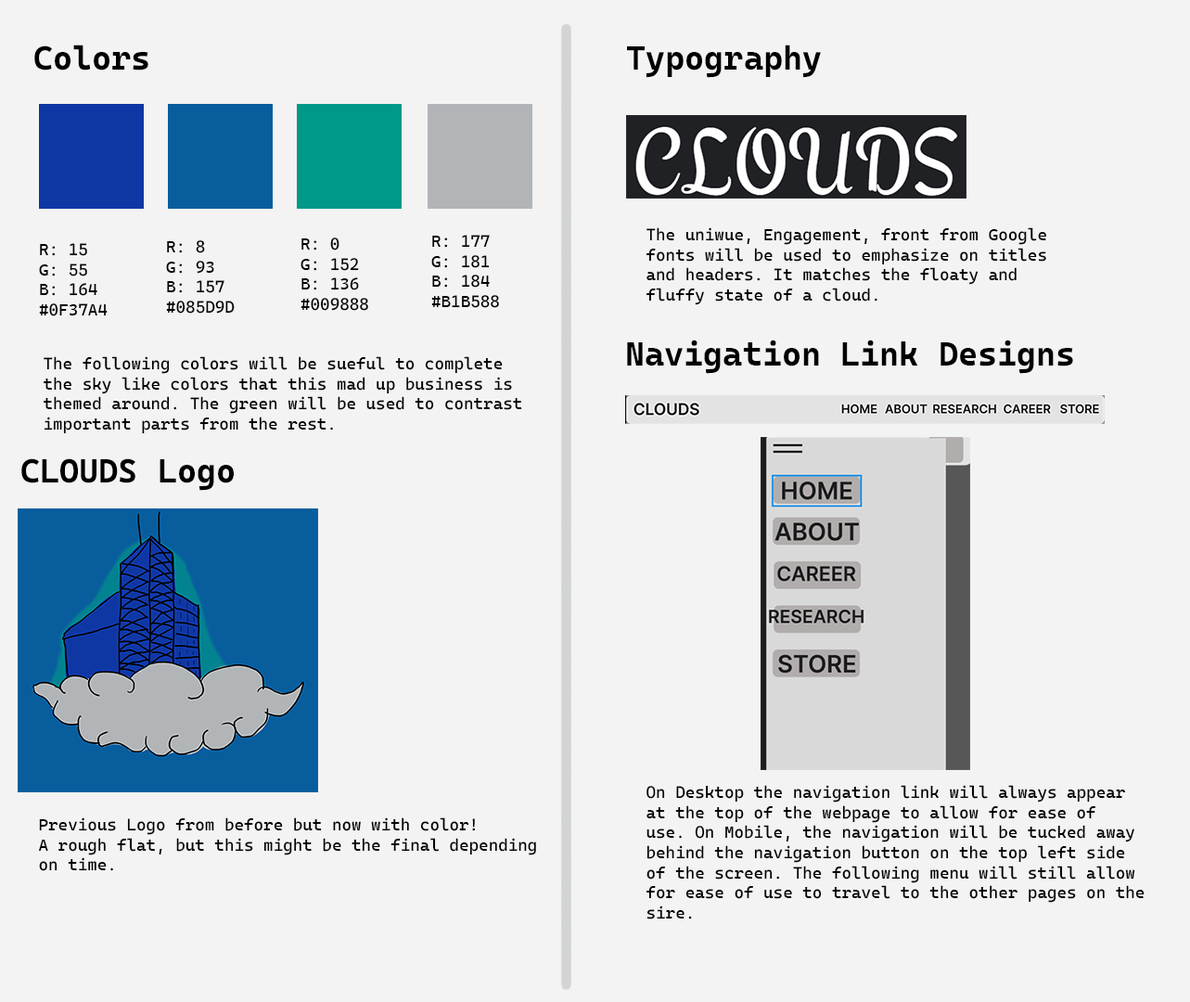
<style>
.page{position:relative;width:1190px;height:1002px;background:#f3f3f3}
.page>*{position:absolute;margin:0}
.t1{font:33.4px "CascadiaCodeRoman-Bold";color:#000000}
.t2{font:16.7px "CascadiaCode-Roman";color:#000000}
</style>
<div class="page">
<p class="t1" style="left:34px;top:45px;width:114px;height:26px">Colors</p>
<p class="t1" style="left:627px;top:45px;width:194px;height:33px">Typography</p>
<p class="t2" style="left:647px;top:227px;width:399px;height:78px">The uniwue, Engagement, front from Google<br>fonts will be used to emphasize on titles <br>and headers. It matches the floaty and <br>fluffy state of a cloud.</p>
<p class="t2" style="left:39px;top:243px;width:69px;height:73px">R: 15<br>G: 55<br>B: 164<br>#0F37A4</p>
<p class="t2" style="left:166px;top:240px;width:69px;height:74px">R: 8<br>G: 93<br>B: 157<br>#085D9D</p>
<p class="t2" style="left:301px;top:237px;width:67px;height:74px">R: 0<br>G: 152<br>B: 136<br>#009888</p>
<p class="t2" style="left:431px;top:235px;width:68px;height:73px">R: 177<br>G: 181<br>B: 184<br>#B1B588</p>
<p class="t1" style="left:627px;top:340px;width:446px;height:34px">Navigation Link Designs</p>
<p class="t2" style="left:44px;top:356px;width:478px;height:78px">The following colors will be sueful to complete<br>the sky like colors that this mad up business is<br>themed around. The green will be used to contrast<br>important parts from the rest.</p>
<p class="t1" style="left:21px;top:458px;width:213px;height:33px">CLOUDS Logo</p>
<p class="t2" style="left:647px;top:785px;width:498px;height:134px">On Desktop the navigation link will always appear<br>at the top of the webpage to allow for ease of<br>use. On Mobile, the navigation will be tucked away<br>behind the navigation button on the top left side<br>of the screen. The following menu will still allow<br>for ease of use to travel to the other pages on the<br>sire.</p>
<p class="t2" style="left:39px;top:817px;width:497px;height:54px">Previous Logo from before but now with color!<br>A rough flat, but this might be the final depending<br>on time.</p>
</div>
